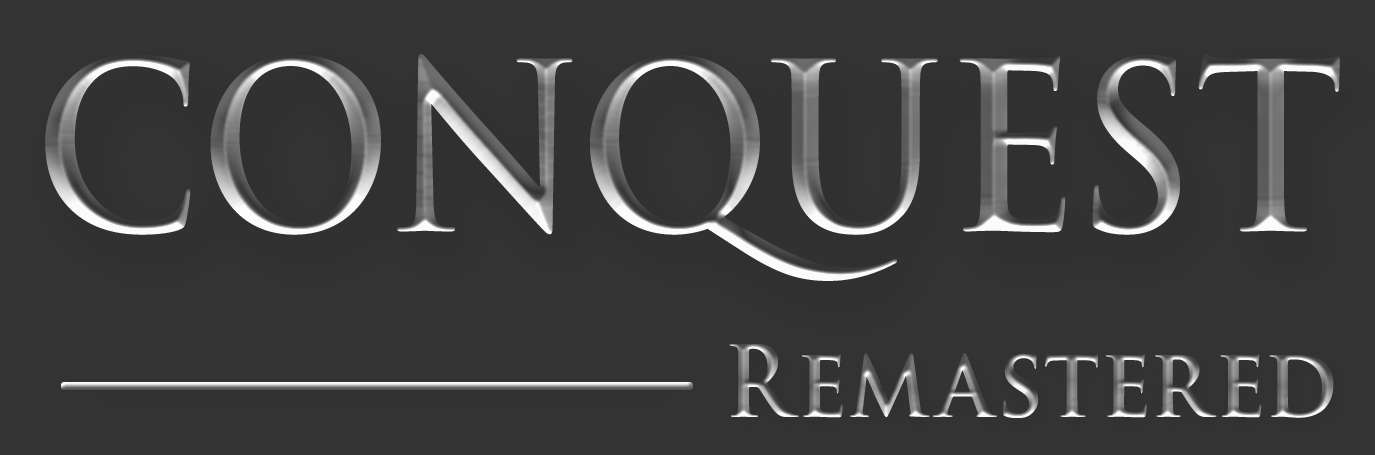
<style>
.page{position:relative;width:1375px;height:455px;background:#333333}
.page>*{position:absolute;margin:0}
.t1{font:229.2px "TrajanPro-Bold";letter-spacing:0.025em;scale:0.91 1}
.t2{font:96.3px "TrajanPro-Bold";letter-spacing:0.025em;scale:0.91 1}
</style>
<div class="page">
<p class="t1" style="left:45px;top:54px;width:1295px;height:227px">CONQUEST</p>
<p class="t2" style="left:729px;top:344px;width:605px;height:74px">Remastered</p>
</div>
